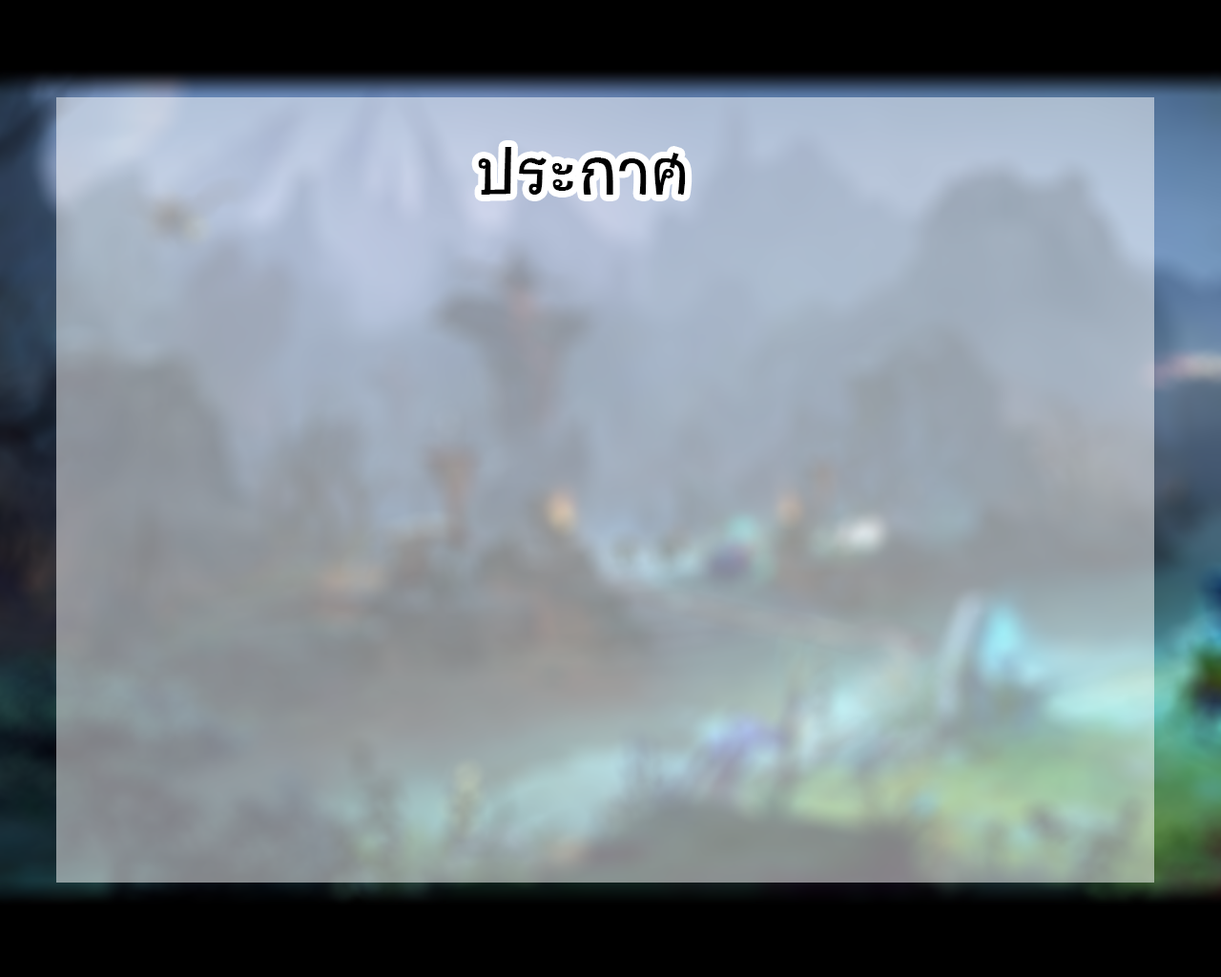
<style>
.page{position:relative;width:1221px;height:977px}
.page>*{position:absolute;margin:0}
.t1{font:94.7px "2005_iannnnnGMO";color:#000000}
</style>
<div class="page">
<p class="t1" style="left:478px;top:147px;width:208px;height:48px">ประกาศ</p>
</div>
